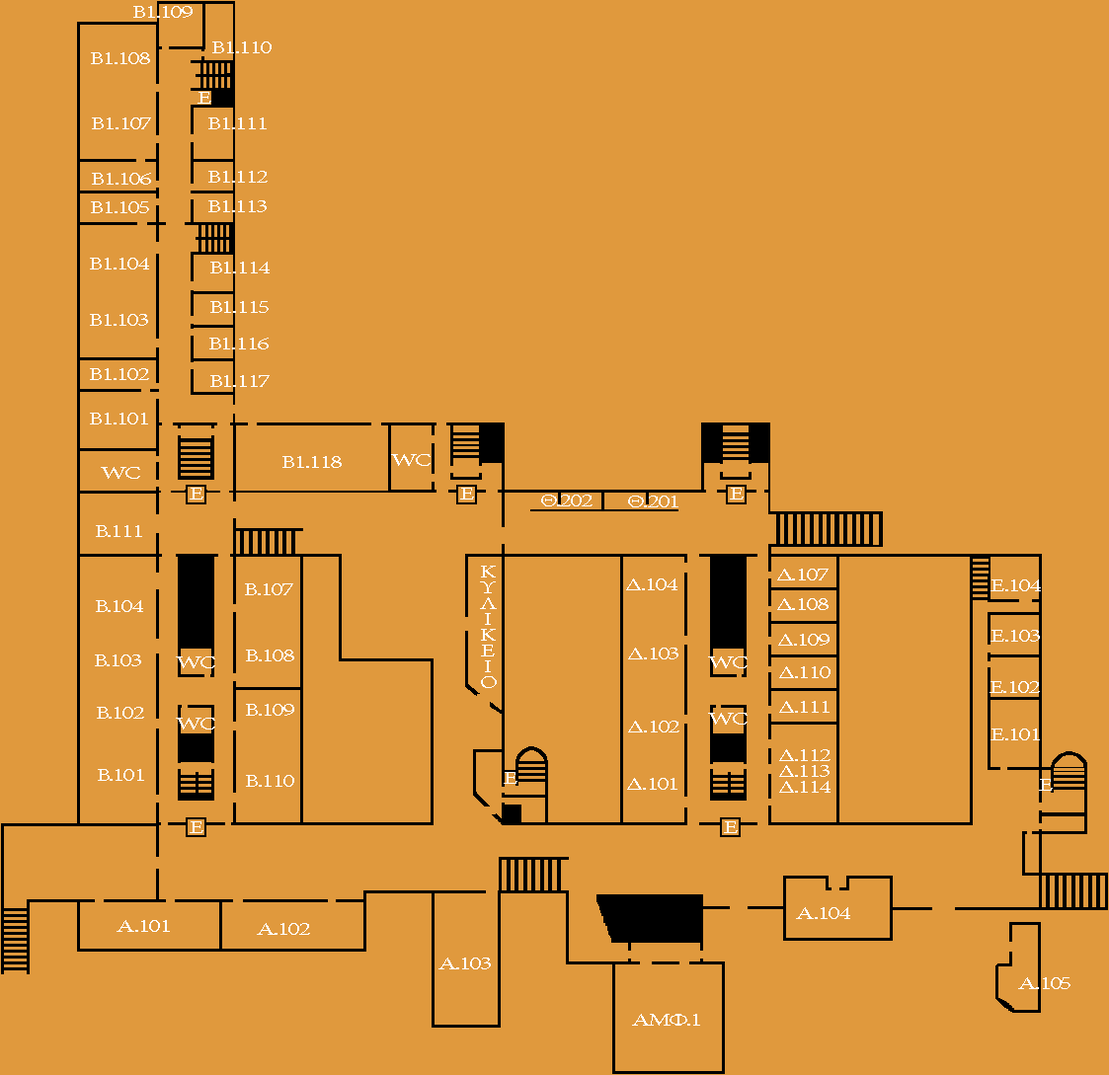
<style>
.page{position:relative;width:1109px;height:1075px;background:#e0993d}
.page>*{position:absolute;margin:0}
.t1{font:18.2px "MinionPro-Regular";letter-spacing:-0.08em;color:#ffffff;scale:1.45 1}
</style>
<div class="page">
<p class="t1" style="left:133px;top:6px;width:60px;height:12px">B1.109</p>
<p class="t1" style="left:212px;top:41px;width:60px;height:12px">B1.110</p>
<p class="t1" style="left:91px;top:52px;width:59px;height:12px">B1.108</p>
<p class="t1" style="left:197px;top:92px;width:14px;height:12px">E</p>
<p class="t1" style="left:92px;top:118px;width:59px;height:11px">B1.107</p>
<p class="t1" style="left:208px;top:118px;width:59px;height:11px">B1.111</p>
<p class="t1" style="left:92px;top:173px;width:59px;height:12px">B1.106</p>
<p class="t1" style="left:208px;top:171px;width:60px;height:12px">B1.112</p>
<p class="t1" style="left:91px;top:201px;width:58px;height:12px">B1.105</p>
<p class="t1" style="left:208px;top:200px;width:59px;height:12px">B1.113</p>
<p class="t1" style="left:90px;top:258px;width:59px;height:12px">B1.104</p>
<p class="t1" style="left:210px;top:262px;width:60px;height:12px">B1.114</p>
<p class="t1" style="left:210px;top:301px;width:59px;height:12px">B1.115</p>
<p class="t1" style="left:90px;top:314px;width:58px;height:12px">B1.103</p>
<p class="t1" style="left:209px;top:338px;width:60px;height:12px">B1.116</p>
<p class="t1" style="left:90px;top:368px;width:59px;height:12px">B1.102</p>
<p class="t1" style="left:210px;top:375px;width:60px;height:12px">B1.117</p>
<p class="t1" style="left:90px;top:413px;width:58px;height:12px">B1.101</p>
<p class="t1" style="left:282px;top:456px;width:60px;height:12px">B1.118</p>
<p class="t1" style="left:391px;top:454px;width:40px;height:12px">WC</p>
<p class="t1" style="left:101px;top:467px;width:39px;height:12px">WC</p>
<p class="t1" style="left:190px;top:488px;width:13px;height:12px">E</p>
<p class="t1" style="left:460px;top:488px;width:14px;height:12px">E</p>
<p class="t1" style="left:541px;top:495px;width:51px;height:12px">Θ.202</p>
<p class="t1" style="left:628px;top:496px;width:50px;height:12px">Θ.201</p>
<p class="t1" style="left:730px;top:488px;width:14px;height:12px">E</p>
<p class="t1" style="left:96px;top:525px;width:46px;height:12px">B.111</p>
<p class="t1" style="left:480px;top:566px;width:17px;height:122px;text-align:center">Κ<br>Υ<br>Λ<br>Ι<br>Κ<br>Ε<br>Ι<br>Ο</p>
<p class="t1" style="left:777px;top:569px;width:51px;height:12px">Δ.107</p>
<p class="t1" style="left:626px;top:579px;width:51px;height:11px">Δ.104</p>
<p class="t1" style="left:990px;top:580px;width:51px;height:11px">Ε.104</p>
<p class="t1" style="left:245px;top:584px;width:48px;height:11px">B.107</p>
<p class="t1" style="left:96px;top:600px;width:47px;height:12px">B.104</p>
<p class="t1" style="left:777px;top:598px;width:51px;height:12px">Δ.108</p>
<p class="t1" style="left:990px;top:630px;width:50px;height:12px">Ε.103</p>
<p class="t1" style="left:778px;top:634px;width:51px;height:12px">Δ.109</p>
<p class="t1" style="left:246px;top:650px;width:48px;height:12px">B.108</p>
<p class="t1" style="left:628px;top:648px;width:50px;height:12px">Δ.103</p>
<p class="t1" style="left:95px;top:655px;width:46px;height:12px">B.103</p>
<p class="t1" style="left:176px;top:657px;width:39px;height:12px">WC</p>
<p class="t1" style="left:708px;top:657px;width:39px;height:12px">WC</p>
<p class="t1" style="left:779px;top:667px;width:51px;height:11px">Δ.110</p>
<p class="t1" style="left:989px;top:681px;width:51px;height:12px">Ε.102</p>
<p class="t1" style="left:779px;top:701px;width:50px;height:12px">Δ.111</p>
<p class="t1" style="left:97px;top:707px;width:47px;height:12px">B.102</p>
<p class="t1" style="left:246px;top:704px;width:48px;height:12px">B.109</p>
<p class="t1" style="left:708px;top:713px;width:39px;height:12px">WC</p>
<p class="t1" style="left:176px;top:718px;width:39px;height:12px">WC</p>
<p class="t1" style="left:628px;top:721px;width:51px;height:12px">Δ.102</p>
<p class="t1" style="left:990px;top:729px;width:50px;height:12px">Ε.101</p>
<p class="t1" style="left:779px;top:749px;width:51px;height:44px">Δ.112<br>Δ.113<br>Δ.114</p>
<p class="t1" style="left:98px;top:769px;width:46px;height:12px">B.101</p>
<p class="t1" style="left:504px;top:772px;width:13px;height:12px">E</p>
<p class="t1" style="left:246px;top:775px;width:48px;height:12px">B.110</p>
<p class="t1" style="left:627px;top:778px;width:50px;height:12px">Δ.101</p>
<p class="t1" style="left:1039px;top:779px;width:14px;height:12px">Ε</p>
<p class="t1" style="left:190px;top:822px;width:13px;height:11px">E</p>
<p class="t1" style="left:724px;top:822px;width:14px;height:11px">E</p>
<p class="t1" style="left:796px;top:907px;width:54px;height:12px">A.104</p>
<p class="t1" style="left:117px;top:920px;width:53px;height:12px">A.101</p>
<p class="t1" style="left:257px;top:923px;width:53px;height:12px">A.102</p>
<p class="t1" style="left:438px;top:958px;width:53px;height:12px">A.103</p>
<p class="t1" style="left:1018px;top:978px;width:52px;height:11px">A.105</p>
<p class="t1" style="left:632px;top:1014px;width:68px;height:12px">ΑΜΦ.1</p>
</div>
